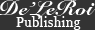
<style>
.page{position:relative;width:95px;height:30px;background:#333333}
.page>*{position:absolute;margin:0}
.t1{font:20px "SnellRoundhand-Black";letter-spacing:0.025em;color:#ffffff}
.t2{font:13px "Georgia";letter-spacing:0.025em;color:#ffffff}
</style>
<div class="page">
<p class="t1" style="left:0px;top:0px;width:95px;height:19px">De’LeRoi</p>
<p class="t2" style="left:16px;top:16px;width:65px;height:14px">Publishing</p>
</div>
